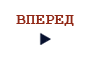
<style>
.page{position:relative;width:90px;height:62px;background:#ffffff}
.page>*{position:absolute;margin:0}
.t1{font:16px "CourierNewPS-BoldMT";color:#912816}
</style>
<div class="page">
<p class="t1" style="left:16px;top:15px;width:58px;height:11px">ВПЕРЕД</p>
</div>
